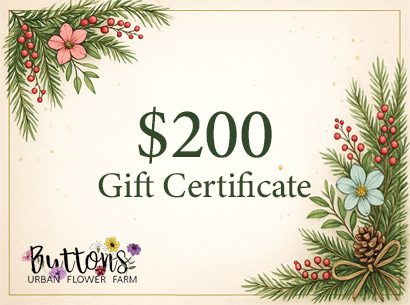
<style>
.page{position:relative;width:410px;height:305px}
.page>*{position:absolute;margin:0}
.t1{font:36px/40px "MinionConceptRoman-Medium";letter-spacing:-0.01em;color:#32482a}
.t2{font:72px/40px "MinionConceptRoman-Medium";letter-spacing:-0.01em;color:#32482a}
</style>
<div class="page">
<p class="t1" style="left:98px;top:106px;width:213px;height:92px;text-align:center"><span class="t2">$200<br></span>Gift Certificate</p>
</div>
